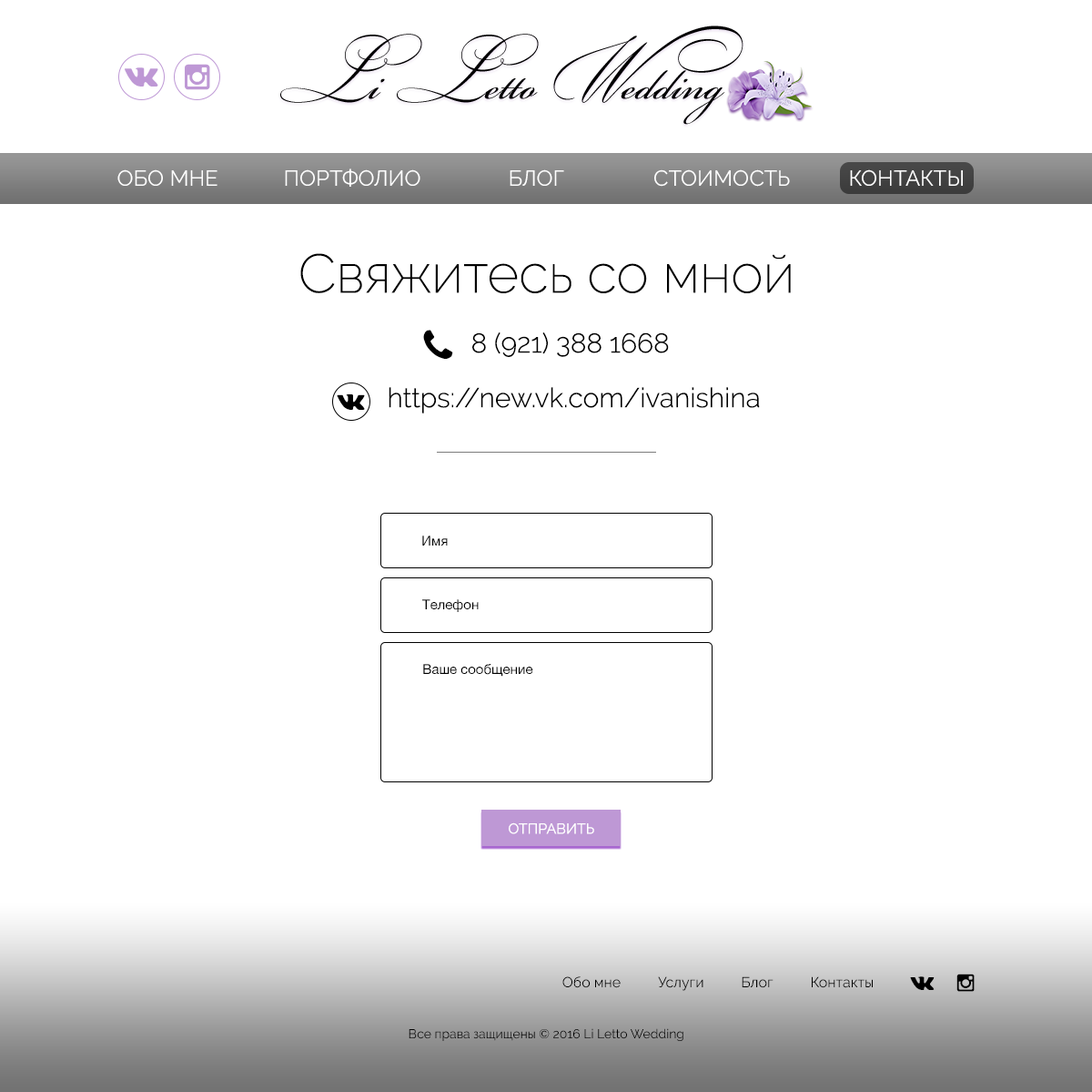
<style>
.page{position:relative;width:1092px;height:1092px;background:#ffffff}
.page>*{position:absolute;margin:0}
.t1{font:21.8px "Raleway-Regular";color:#ffffff;text-transform:uppercase}
.t2{font:54.6px "Raleway-ExtraLight";color:#000000}
.t3{font:27.3px "Raleway-Light";color:#000000}
.t4{font:13.7px "HelveticaNeue";color:#000000}
.t5{font:14.6px "Raleway-Regular";color:#ffffff}
.t6{font:14.6px "Raleway-Regular";color:#000000}
.t7{font:12.7px "Raleway-Regular";color:#000000}
</style>
<div class="page">
<p class="t1" style="left:117px;top:169px;width:101px;height:17px">Обо мне</p>
<p class="t1" style="left:285px;top:168px;width:136px;height:19px">портфолио</p>
<p class="t1" style="left:510px;top:169px;width:54px;height:17px">Блог</p>
<p class="t1" style="left:655px;top:169px;width:135px;height:18px">стоимость</p>
<p class="t1" style="left:850px;top:169px;width:113px;height:17px">Контакты</p>
<p class="t2" style="left:300px;top:253px;width:491px;height:40px">Свяжитесь со мной</p>
<p class="t3" style="left:472px;top:332px;width:197px;height:25px">8 (921) 388 1668</p>
<p class="t3" style="left:389px;top:387px;width:371px;height:26px">https://new.vk.com/ivanishina</p>
<p class="t4" style="left:422px;top:535px;width:26px;height:10px">Имя</p>
<p class="t4" style="left:422px;top:599px;width:57px;height:13px">Телефон</p>
<p class="t4" style="left:423px;top:664px;width:110px;height:12px">Ваше сообщение</p>
<p class="t5" style="left:509px;top:822px;width:85px;height:12px">ОТПРАВИТЬ</p>
<p class="t6" style="left:563px;top:976px;width:310px;height:14px">Обо мне          Услуги          Блог          Контакты</p>
<p class="t7" style="left:409px;top:1028px;width:275px;height:13px">Все права защищены © 2016 Li Letto Wedding</p>
</div>
